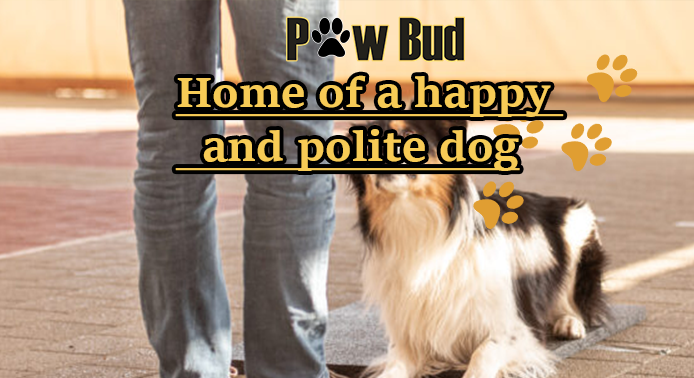
<style>
.page{position:relative;width:694px;height:378px}
.page>*{position:absolute;margin:0}
.t1{font:45px "Sitka-TextBold";color:#f7cb56;text-decoration:underline}
</style>
<div class="page">
<p class="t1" style="left:175px;top:75px;width:389px;height:96px">Home of a happy <br>  and polite dog</p>
</div>
